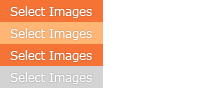
<style>
.page{position:relative;width:200px;height:88px;background:#ffffff}
.page>*{position:absolute;margin:0}
.t1{font:12px/22px "Verdana";letter-spacing:-0.025em;color:#ffffff}
.t2{font:12px/22px "Verdana";letter-spacing:-0.025em;color:#ebebeb}
</style>
<div class="page">
<p class="t1" style="left:10px;top:6px;width:82px;height:78px">Select Images<br>Select Images<br>Select Images<br><span class="t2">Select Images</span></p>
</div>
